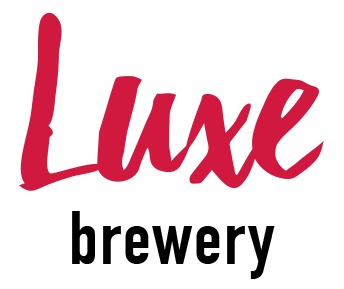
<style>
.page{position:relative;width:344px;height:289px;background:#ffffff}
.page>*{position:absolute;margin:0}
.t1{font:75.1px "DINCondensed-Bold";letter-spacing:0.025em;color:#000000}
.t2{font:242.5px "Debby";color:#d11940}
</style>
<div class="page">
<p class="t1" style="left:19px;top:12px;width:305px;height:267px;text-align:center"><span class="t2">Luxe<br></span>brewery</p>
</div>
